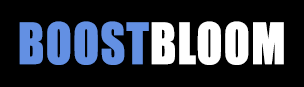
<style>
.page{position:relative;width:304px;height:87px;background:#000000}
.page>*{position:absolute;margin:0}
.t1{font:52.5px "Impact";color:#6390e3;font-weight:bold;scale:0.91 1}
.t2{font:52.5px "Impact";color:#ffffff;font-weight:bold;scale:0.91 1}
</style>
<div class="page">
<p class="t1" style="left:19px;top:21px;width:265px;height:44px">BOOST<span class="t2">BLOOM</span></p>
</div>
